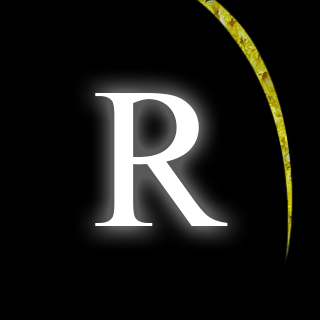
<style>
.page{position:relative;width:320px;height:320px;background:#000000}
.page>*{position:absolute;margin:0}
.t1{font:200px "TimesNewRomanPSMT";color:#ffffff}
</style>
<div class="page">
<p class="t1" style="left:95px;top:93px;width:133px;height:133px">R</p>
</div>
